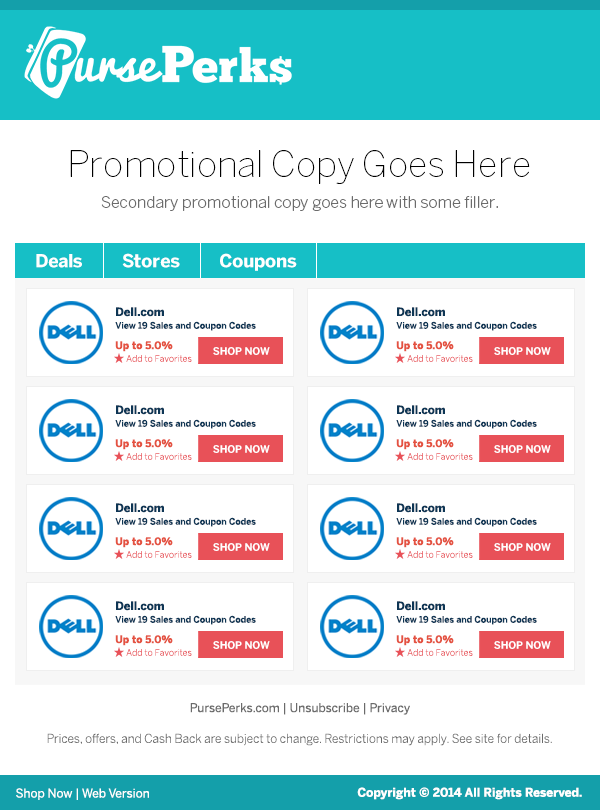
<style>
.page{position:relative;width:600px;height:810px;background:#ffffff}
.page>*{position:absolute;margin:0}
.t1{font:36px "BentonSans-Thin";color:#000000}
.t2{font:16px "BentonSans-Light";color:#6b6b6b}
.t3{font:18px "BentonSans-Bold";color:#ffffff}
.t4{font:11.4px "BentonSans-Bold";color:#0e3655}
.t5{font:8.9px "BentonSans-Medium";color:#0e3655}
.t6{font:10.2px "BentonSans-Bold";color:#e45241}
.t7{font:10.2px "BentonSans-Bold";color:#ffffff;text-transform:uppercase}
.t8{font:8.9px "BentonSans-Light";color:#e96066}
.t9{font:12px "BentonSans-Regular";color:#6b6b6b}
.t10{font:12px "BentonSans-Light";color:#6b6b6b}
.t11{font:12px "BentonSans-Regular";color:#ffffff}
.t12{font:12px "BentonSans-Bold";color:#ffffff}
</style>
<div class="page">
<p class="t1" style="left:70px;top:150px;width:460px;height:34px">Promotional Copy Goes Here</p>
<p class="t2" style="left:101px;top:196px;width:397px;height:15px">Secondary promotional copy goes here with some filler.</p>
<p class="t3" style="left:36px;top:254px;width:46px;height:14px">Deals</p>
<p class="t3" style="left:122px;top:253px;width:58px;height:15px">Stores</p>
<p class="t3" style="left:220px;top:253px;width:77px;height:18px">Coupons</p>
<p class="t4" style="left:116px;top:307px;width:48px;height:10px">Dell.com</p>
<p class="t4" style="left:397px;top:307px;width:48px;height:10px">Dell.com</p>
<p class="t5" style="left:115px;top:321px;width:141px;height:10px">View 19 Sales and Coupon Codes</p>
<p class="t5" style="left:396px;top:321px;width:141px;height:10px">View 19 Sales and Coupon Codes</p>
<p class="t6" style="left:115px;top:341px;width:58px;height:11px">Up to 5.0%</p>
<p class="t6" style="left:396px;top:341px;width:58px;height:11px">Up to 5.0%</p>
<p class="t7" style="left:213px;top:347px;width:57px;height:8px">Shop Now</p>
<p class="t7" style="left:494px;top:347px;width:57px;height:8px">Shop Now</p>
<p class="t8" style="left:126px;top:355px;width:66px;height:7px">Add to Favorites</p>
<p class="t8" style="left:407px;top:355px;width:66px;height:7px">Add to Favorites</p>
<p class="t4" style="left:116px;top:405px;width:48px;height:10px">Dell.com</p>
<p class="t4" style="left:397px;top:405px;width:48px;height:10px">Dell.com</p>
<p class="t5" style="left:115px;top:419px;width:141px;height:10px">View 19 Sales and Coupon Codes</p>
<p class="t5" style="left:396px;top:419px;width:141px;height:10px">View 19 Sales and Coupon Codes</p>
<p class="t6" style="left:115px;top:439px;width:58px;height:11px">Up to 5.0%</p>
<p class="t7" style="left:213px;top:445px;width:57px;height:8px">Shop Now</p>
<p class="t6" style="left:396px;top:439px;width:58px;height:11px">Up to 5.0%</p>
<p class="t7" style="left:494px;top:445px;width:57px;height:8px">Shop Now</p>
<p class="t8" style="left:126px;top:453px;width:66px;height:7px">Add to Favorites</p>
<p class="t8" style="left:407px;top:453px;width:66px;height:7px">Add to Favorites</p>
<p class="t4" style="left:116px;top:503px;width:48px;height:10px">Dell.com</p>
<p class="t4" style="left:397px;top:503px;width:48px;height:10px">Dell.com</p>
<p class="t5" style="left:115px;top:517px;width:141px;height:10px">View 19 Sales and Coupon Codes</p>
<p class="t5" style="left:396px;top:517px;width:141px;height:10px">View 19 Sales and Coupon Codes</p>
<p class="t6" style="left:115px;top:537px;width:58px;height:11px">Up to 5.0%</p>
<p class="t7" style="left:213px;top:543px;width:57px;height:8px">Shop Now</p>
<p class="t6" style="left:396px;top:537px;width:58px;height:11px">Up to 5.0%</p>
<p class="t7" style="left:494px;top:543px;width:57px;height:8px">Shop Now</p>
<p class="t8" style="left:126px;top:551px;width:66px;height:7px">Add to Favorites</p>
<p class="t8" style="left:407px;top:551px;width:66px;height:7px">Add to Favorites</p>
<p class="t4" style="left:116px;top:601px;width:48px;height:10px">Dell.com</p>
<p class="t4" style="left:397px;top:601px;width:48px;height:10px">Dell.com</p>
<p class="t5" style="left:115px;top:615px;width:141px;height:10px">View 19 Sales and Coupon Codes</p>
<p class="t5" style="left:396px;top:615px;width:141px;height:10px">View 19 Sales and Coupon Codes</p>
<p class="t6" style="left:115px;top:635px;width:58px;height:11px">Up to 5.0%</p>
<p class="t7" style="left:213px;top:641px;width:57px;height:8px">Shop Now</p>
<p class="t6" style="left:396px;top:635px;width:58px;height:11px">Up to 5.0%</p>
<p class="t7" style="left:494px;top:641px;width:57px;height:8px">Shop Now</p>
<p class="t8" style="left:126px;top:649px;width:66px;height:7px">Add to Favorites</p>
<p class="t8" style="left:407px;top:649px;width:66px;height:7px">Add to Favorites</p>
<p class="t9" style="left:190px;top:703px;width:220px;height:12px">PursePerks.com | Unsubscribe | Privacy</p>
<p class="t10" style="left:47px;top:733px;width:505px;height:13px">Prices, offers, and Cash Back are subject to change. Restrictions may apply. See site for details.</p>
<p class="t11" style="left:16px;top:788px;width:133px;height:12px">Shop Now | Web Version</p>
<p class="t12" style="left:357px;top:787px;width:225px;height:13px">Copyright © 2014 All Rights Reserved.</p>
</div>
